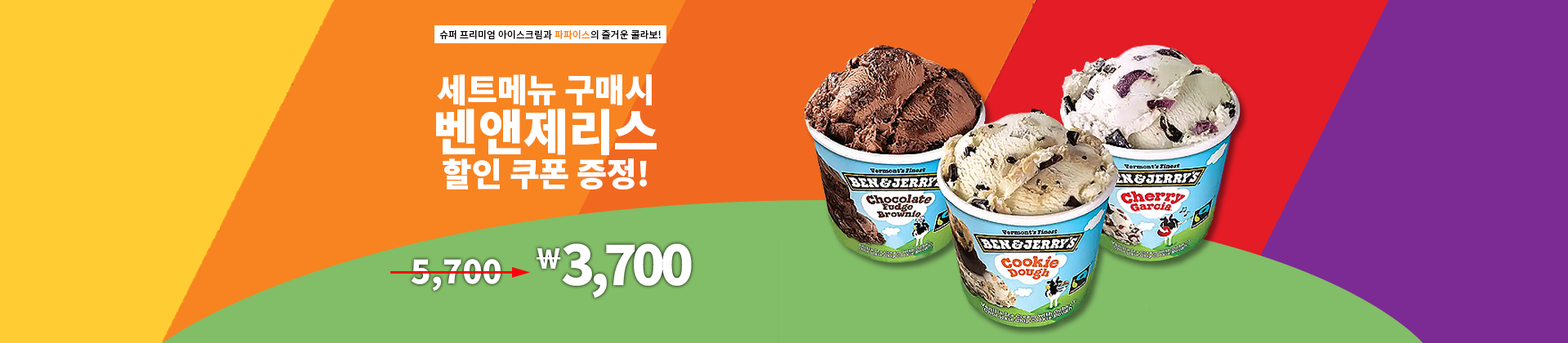
<style>
.page{position:relative;width:1568px;height:343px}
.page>*{position:absolute;margin:0}
.t1{font:32.7px/44.1px "NotoSansKR-Black";color:#ffffff}
.t2{font:32.7px/34.3px "NotoSansKR-Black";color:#ffffff}
.t3{font:49px/49.8px "NotoSansKR-Black";color:#ffffff}
.t4{font:32.7px "NotoSansKR-Black";color:#ffffff}
</style>
<div class="page">
<p class="t1" style="left:436px;top:74px;width:221px;height:115px;text-align:center"><span class="t2">세트메뉴 구매시<br></span><span class="t3">벤앤제리스<br></span>할인 쿠폰 증정!</p>
<p class="t4" style="left:411px;top:259px;width:90px;height:32px">5,700</p>
</div>
